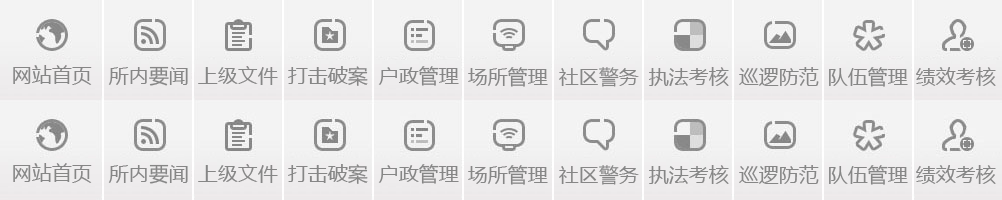
<style>
.page{position:relative;width:1002px;height:200px;background:#f3f3f3}
.page>*{position:absolute;margin:0}
.t1{font:20px "MicrosoftYaHei";color:#868686}
</style>
<div class="page">
<p class="t1" style="left:13px;top:65px;width:79px;height:20px">网站首页</p>
<p class="t1" style="left:108px;top:66px;width:80px;height:20px">所内要闻</p>
<p class="t1" style="left:198px;top:66px;width:80px;height:19px">上级文件</p>
<p class="t1" style="left:288px;top:66px;width:80px;height:20px">打击破案</p>
<p class="t1" style="left:378px;top:66px;width:81px;height:20px">户政管理</p>
<p class="t1" style="left:468px;top:67px;width:80px;height:20px">场所管理</p>
<p class="t1" style="left:559px;top:67px;width:80px;height:20px">社区警务</p>
<p class="t1" style="left:649px;top:67px;width:80px;height:19px">执法考核</p>
<p class="t1" style="left:739px;top:67px;width:80px;height:19px">巡逻防范</p>
<p class="t1" style="left:829px;top:67px;width:79px;height:20px">队伍管理</p>
<p class="t1" style="left:916px;top:67px;width:80px;height:19px">绩效考核</p>
</div>
